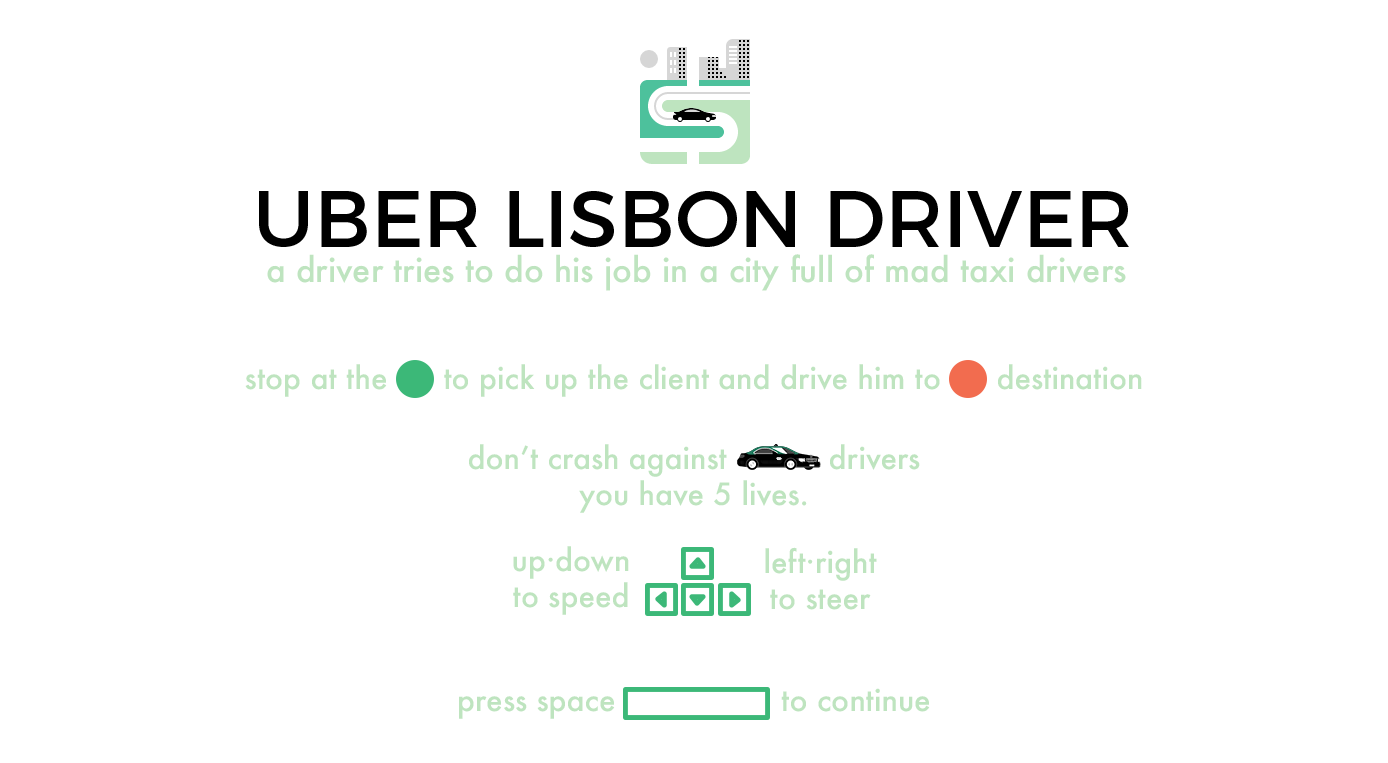
<style>
.page{position:relative;width:1388px;height:763px;background:#ffffff}
.page>*{position:absolute;margin:0}
.t1{font:80px "Montserrat-Regular";color:#000000}
.t2{font:33px "Futura-Medium";color:#bee4bf}
.t3{font:30px "Futura-Medium";color:#bee4bf}
</style>
<div class="page">
<p class="t1" style="left:259px;top:191px;width:870px;height:56px">UBER LISBON DRIVER</p>
<p class="t2" style="left:267px;top:254px;width:859px;height:37px">a driver tries to do his job in a city full of mad taxi drivers</p>
<p class="t3" style="left:245px;top:364px;width:897px;height:33px">stop at the      to pick up the client and drive him to      destination</p>
<p class="t3" style="left:513px;top:546px;width:116px;height:69px;text-align:center">up·down<br>to speed</p>
<p class="t3" style="left:765px;top:547px;width:112px;height:63px;text-align:center">left·right<br>to steer</p>
<p class="t3" style="left:459px;top:688px;width:471px;height:31px">press space      to continue</p>
</div>
